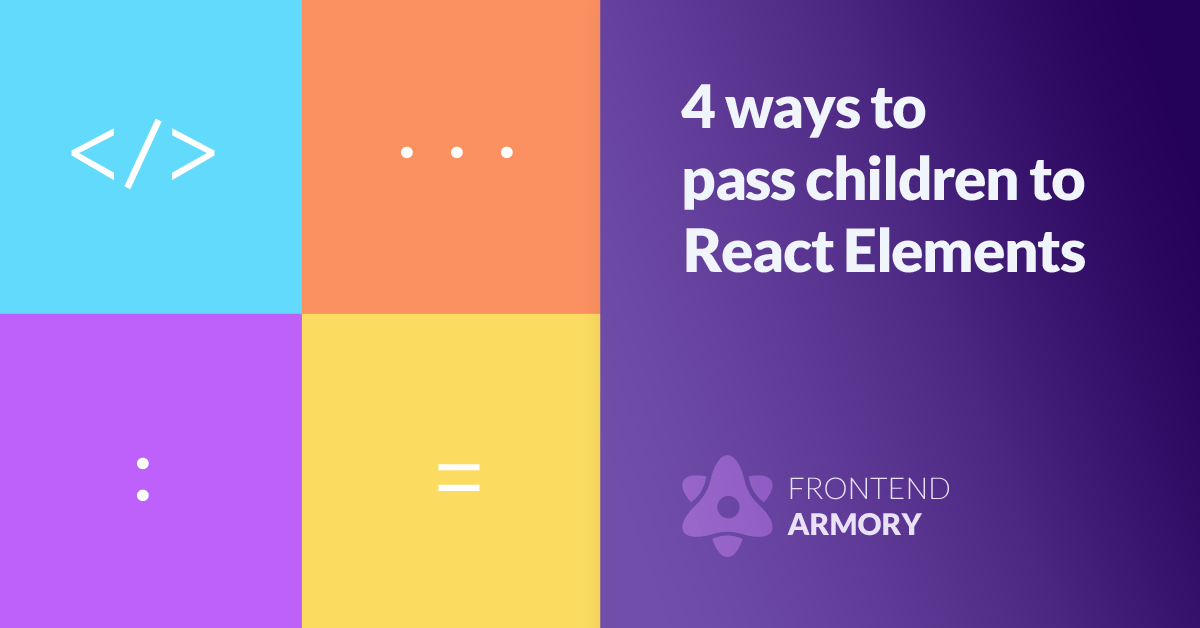
<style>
.page{position:relative;width:1200px;height:628px}
.page>*{position:absolute;margin:0}
.t1{font:60px "Lato-Black";letter-spacing:-0.025em;color:#f0f4fb}
.t2{font:60px/72px "Lato-Black";letter-spacing:-0.025em;color:#f0f4fb}
.t3{font:100px "Inconsolata";color:#ffffff}
.t4{font:30px "Lato-Light";color:#e9e1f6}
.t5{font:30px "Lato-Black";color:#e9e1f6}
</style>
<div class="page">
<p class="t1" style="left:681px;top:84px;width:404px;height:189px"><span class="t2">4 ways to<br></span>pass children to<br><span class="t2">React Elements</span></p>
<p class="t3" style="left:71px;top:118px;width:144px;height:72px">&lt;/&gt;</p>
<p class="t3" style="left:401px;top:146px;width:112px;height:13px">...</p>
<p class="t3" style="left:137px;top:457px;width:12px;height:45px">:</p>
<p class="t3" style="left:438px;top:464px;width:42px;height:27px">=</p>
<p class="t4" style="left:787px;top:477px;width:162px;height:59px">FRONTEND<br><span class="t5">ARMORY</span></p>
</div>
